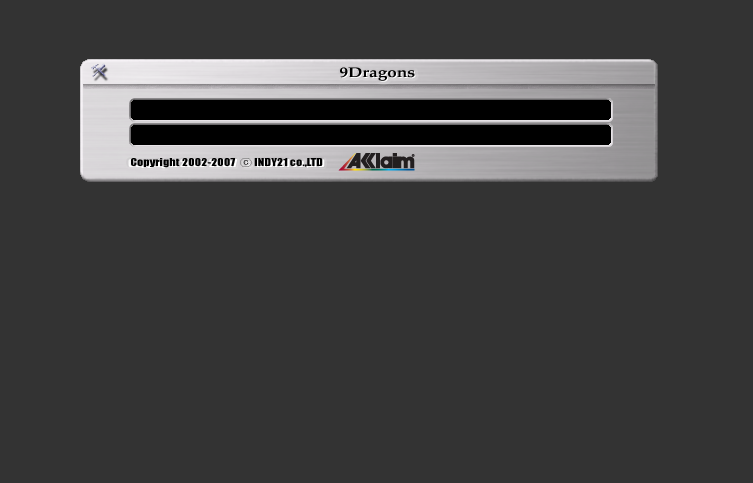
<style>
.page{position:relative;width:753px;height:483px;background:#333333}
.page>*{position:absolute;margin:0}
.t1{font:14px "PalatinoLinotype-Bold";color:#000000;scale:1.23 1}
.t2{font:10px "Impact";color:#000000;scale:1.23 1}
.t3{font:10px "Gulim";color:#000000;scale:1.23 1}
</style>
<div class="page">
<p class="t1" style="left:340px;top:67px;width:75px;height:14px">9Dragons</p>
<p class="t2" style="left:131px;top:158px;width:192px;height:10px">Copyright 2002-2007  <span class="t3">ⓒ</span> INDY21 co.,LTD</p>
</div>
